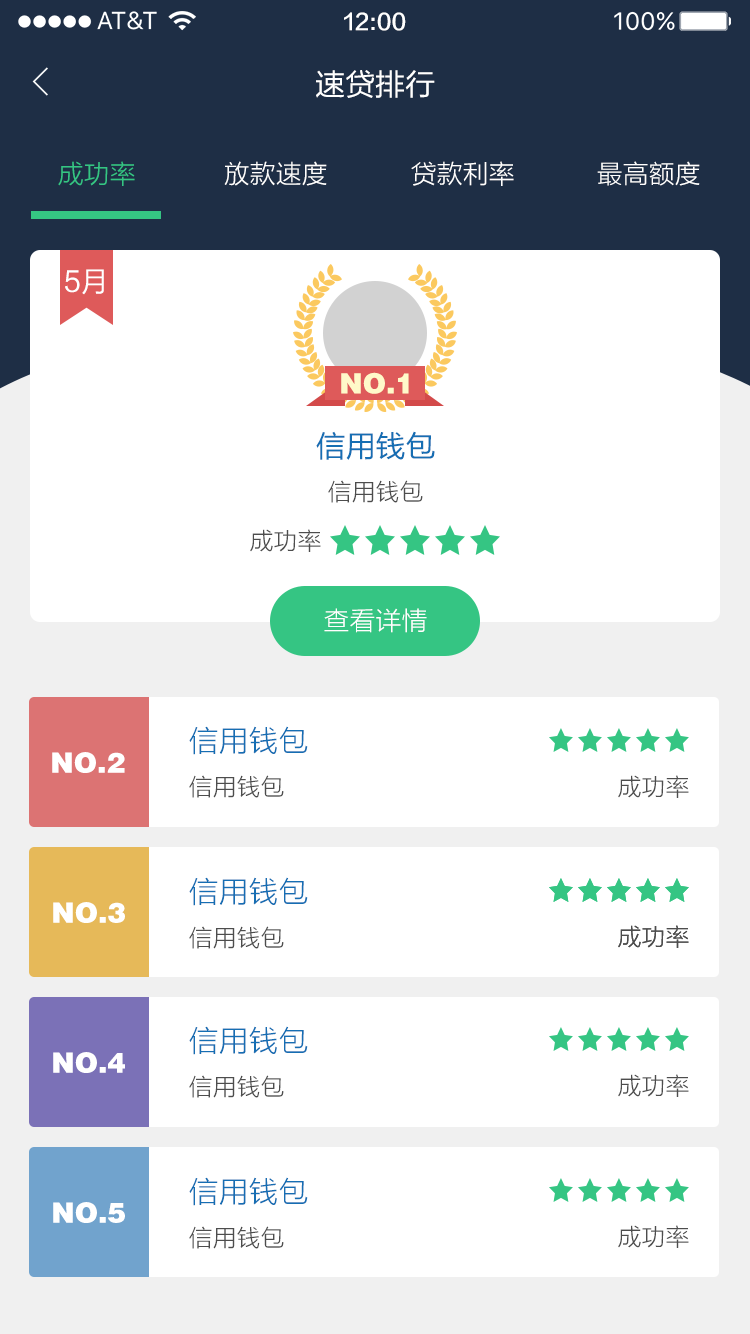
<style>
.page{position:relative;width:750px;height:1334px;background:#ffffff}
.page>*{position:absolute;margin:0}
.t1{font:22px "FZLTZHK--GBK1-0";color:#ffffff}
.t2{font:30px "FZLTHJW--GB1-0";color:#ffffff}
.t3{font:26px "FZLTXHK";color:#35c583}
.t4{font:26px "FZLTXHK";color:#ffffff}
.t5{font:28px "FZLTHJW--GB1-0";color:#ffffff}
.t6{font:28px "FZCCHK--GBK1-0";color:#fff9ca}
.t7{font:30px "FZLTHJW--GB1-0";color:#166eb3}
.t8{font:24px "FZLTXHK";color:#4d4d4d}
.t9{font:30px "FZLTXHK";color:#166eb3}
.t10{font:28px "FZCCHK--GBK1-0";color:#ffffff}
</style>
<div class="page">
<p class="t1" style="left:344px;top:12px;width:62px;height:19px">12:00</p>
<p class="t2" style="left:316px;top:70px;width:119px;height:28px">速贷排行</p>
<p class="t3" style="left:58px;top:161px;width:77px;height:25px">成功率</p>
<p class="t4" style="left:224px;top:161px;width:103px;height:25px">放款速度</p>
<p class="t4" style="left:411px;top:161px;width:103px;height:25px">贷款利率</p>
<p class="t4" style="left:597px;top:161px;width:103px;height:25px">最高额度</p>
<p class="t5" style="left:65px;top:269px;width:39px;height:26px">5月</p>
<p class="t6" style="left:341px;top:372px;width:68px;height:22px">NO.1</p>
<p class="t7" style="left:316px;top:431px;width:119px;height:29px">信用钱包</p>
<p class="t8" style="left:328px;top:480px;width:95px;height:23px">信用钱包</p>
<p class="t8" style="left:250px;top:529px;width:71px;height:23px">成功率</p>
<p class="t4" style="left:324px;top:608px;width:103px;height:25px">查看详情</p>
<p class="t9" style="left:189px;top:726px;width:119px;height:29px">信用钱包</p>
<p class="t10" style="left:52px;top:752px;width:73px;height:21px">NO.2</p>
<p class="t8" style="left:189px;top:775px;width:95px;height:23px">信用钱包</p>
<p class="t8" style="left:618px;top:775px;width:71px;height:23px">成功率</p>
<p class="t9" style="left:189px;top:877px;width:119px;height:29px">信用钱包</p>
<p class="t10" style="left:53px;top:902px;width:72px;height:21px">NO.3</p>
<p class="t8" style="left:189px;top:926px;width:95px;height:23px">信用钱包</p>
<p class="t8" style="left:618px;top:925px;width:71px;height:23px">成功率</p>
<p class="t8" style="left:618px;top:925px;width:71px;height:23px">成功率</p>
<p class="t9" style="left:189px;top:1026px;width:119px;height:29px">信用钱包</p>
<p class="t10" style="left:53px;top:1052px;width:72px;height:21px">NO.4</p>
<p class="t8" style="left:189px;top:1075px;width:95px;height:23px">信用钱包</p>
<p class="t8" style="left:618px;top:1074px;width:71px;height:23px">成功率</p>
<p class="t9" style="left:189px;top:1177px;width:119px;height:29px">信用钱包</p>
<p class="t10" style="left:53px;top:1202px;width:72px;height:21px">NO.5</p>
<p class="t8" style="left:189px;top:1226px;width:95px;height:23px">信用钱包</p>
<p class="t8" style="left:618px;top:1225px;width:71px;height:23px">成功率</p>
</div>
